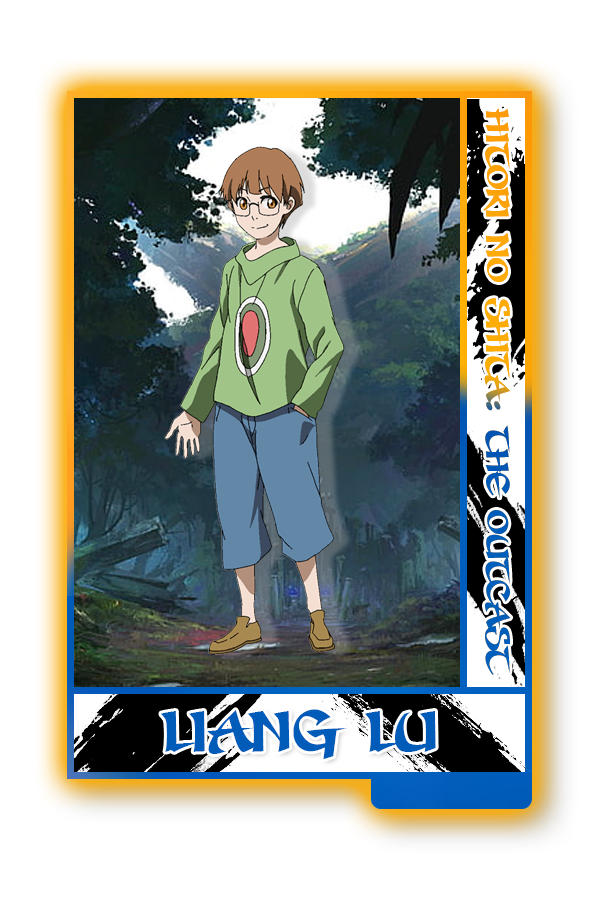
<style>
.page{position:relative;width:600px;height:900px;background:#ffffff}
.page>*{position:absolute;margin:0}
.t1{font:36.7px "SevenSwordsmenBB"}
.t2{font:64.5px "SevenSwordsmenBB";color:#005bb9}
</style>
<div class="page">
<p class="t1" style="left:483px;top:108px;width:28px;height:567px;rotate:90deg">HITORI NO SHITA: THE OUTCAST</p>
<p class="t2" style="left:161px;top:709px;width:275px;height:51px">LIANG LU</p>
</div>
